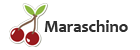
<style>
.page{position:relative;width:140px;height:50px;background:#ffffff}
.page>*{position:absolute;margin:0}
.t1{font:16.8px "Candara-Bold";color:#2e2e2e}
</style>
<div class="page">
<p class="t1" style="left:44px;top:20px;width:84px;height:12px">Maraschino</p>
</div>
